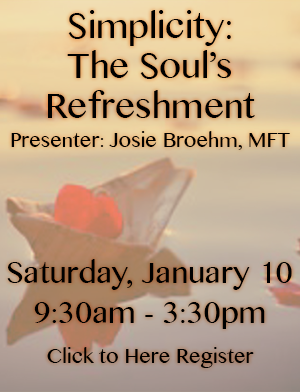
<style>
.page{position:relative;width:300px;height:392px}
.page>*{position:absolute;margin:0}
.t1{font:35px/40px "TamilMN";color:#000000}
.t2{font:20px "TamilMN";color:#000000}
.t3{font:30px/40px "TamilMN";color:#000000}
.t4{font:20px/40px "TamilMN";color:#000000}
</style>
<div class="page">
<p class="t1" style="left:48px;top:10px;width:207px;height:108px;text-align:center">Simplicity: <br>The Soul’s Refreshment</p>
<p class="t2" style="left:11px;top:131px;width:279px;height:19px">Presenter: Josie Broehm, MFT</p>
<p class="t3" style="left:7px;top:259px;width:285px;height:109px;text-align:center">Saturday, January 10<br>9:30am - 3:30pm<br><span class="t4">Click to Here Register</span></p>
</div>
